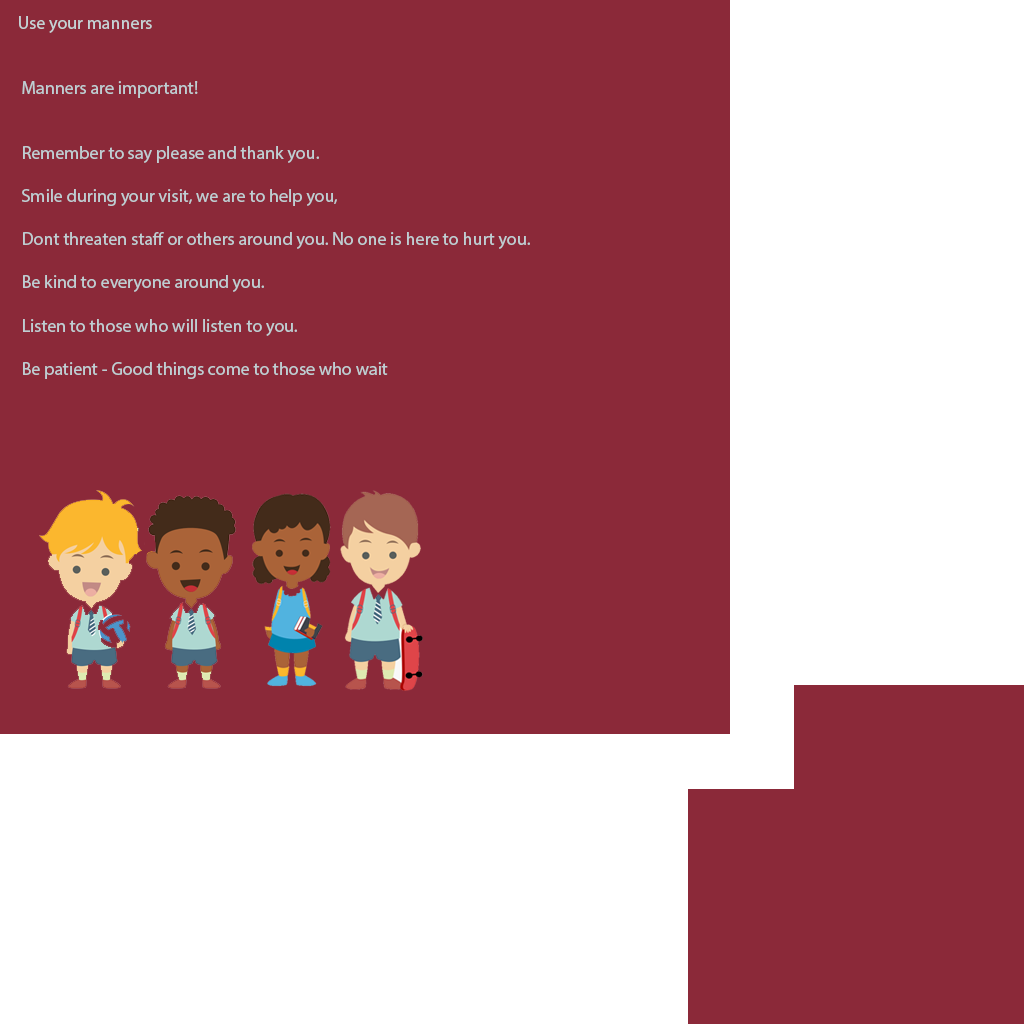
<style>
.page{position:relative;width:1024px;height:1024px;background:#8b2939}
.page>*{position:absolute;margin:0}
.t1{font:18px "MyriadPro-Regular";color:#c5d1d4}
.t2{font:18px "MyriadPro-Regular";color:#bfcdd2}
</style>
<div class="page">
<p class="t1" style="left:19px;top:16px;width:133px;height:17px">Use your manners</p>
<p class="t2" style="left:22px;top:81px;width:508px;height:298px">Manners are important!<br><br><br>Remember to say please and thank you. <br><br>Smile during your visit, we are to help you,<br><br>Dont threaten staff or others around you. No one is here to hurt you.<br><br>Be kind to everyone around you.<br><br>Listen to those who will listen to you.<br><br>Be patient - Good things come to those who wait</p>
</div>
